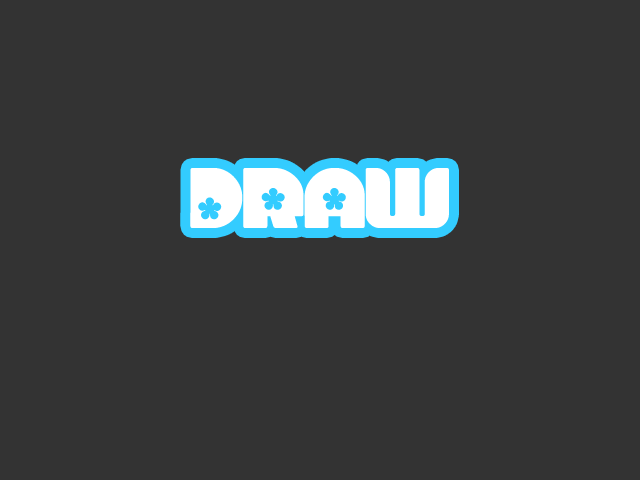
<style>
.page{position:relative;width:640px;height:480px;background:#333333}
.page>*{position:absolute;margin:0}
.t1{font:120px "Chick";color:#ffffff}
</style>
<div class="page">
<p class="t1" style="left:190px;top:168px;width:259px;height:60px">DRAW</p>
</div>
